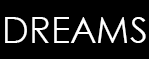
<style>
.page{position:relative;width:149px;height:59px;background:#000000}
.page>*{position:absolute;margin:0}
.t1{font:36px "CenturyGothic";color:#ffffff}
</style>
<div class="page">
<p class="t1" style="left:5px;top:17px;width:141px;height:26px">DREAMS</p>
</div>
